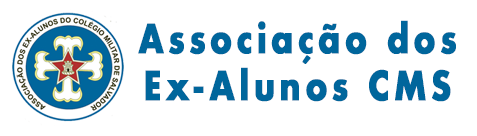
<style>
.page{position:relative;width:477px;height:136px;background:#ffffff}
.page>*{position:absolute;margin:0}
.t1{font:39.1px "Futura-Bold";letter-spacing:0.12em;color:#00669c;font-weight:bold;scale:0.81 1}
</style>
<div class="page">
<p class="t1" style="left:138px;top:20px;width:318px;height:82px;text-align:center">Associação dos Ex-Alunos CMS</p>
</div>
